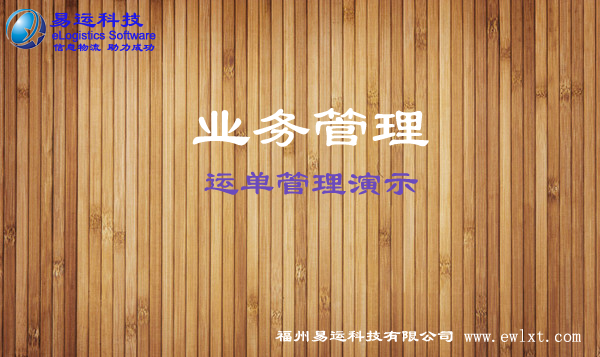
<style>
.page{position:relative;width:600px;height:357px}
.page>*{position:absolute;margin:0}
.t1{font:23.8px "LiSu";color:#1d18eb}
.t2{font:12px "ArialMT";color:#1d18eb}
.t3{font:12px "LiSu";color:#1d18eb}
.t4{font:36px/48px "LiSu";color:#6a4abd}
.t5{font:60px/18px "LiSu";color:#ffffff}
.t6{font:18px "LiSu";color:#ffffff}
</style>
<div class="page">
<p class="t1" style="left:49px;top:12px;width:95px;height:16px">易运科技</p>
<p class="t2" style="left:52px;top:30px;width:104px;height:12px">eLogistics Software</p>
<p class="t3" style="left:53px;top:43px;width:102px;height:9px">信息物流 助力成功</p>
<p class="t4" style="left:192px;top:108px;width:237px;height:87px"><span class="t5">  业务管理 <br>    </span>运单管理演示</p>
<p class="t6" style="left:275px;top:329px;width:306px;height:13px">福州易运科技有限公司 www.ewlxt.com</p>
</div>
